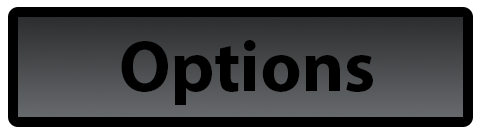
<style>
.page{position:relative;width:484px;height:135px;background:#000000}
.page>*{position:absolute;margin:0}
.t1{font:72px "MyriadPro-Bold";color:#000000}
</style>
<div class="page">
<p class="t1" style="left:121px;top:40px;width:252px;height:65px">Options</p>
</div>
